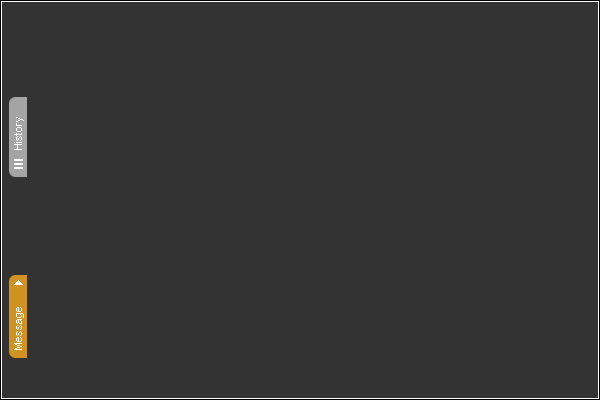
<style>
.page{position:relative;width:600px;height:400px;background:#333333}
.page>*{position:absolute;margin:0}
.t1{font:11px "ArialMT";color:#ffffff}
</style>
<div class="page">
<p class="t1" style="left:14px;top:117px;width:10px;height:33px;rotate:-90deg">History</p>
<p class="t1" style="left:14px;top:307px;width:10px;height:43px;rotate:-90deg">Message</p>
</div>
